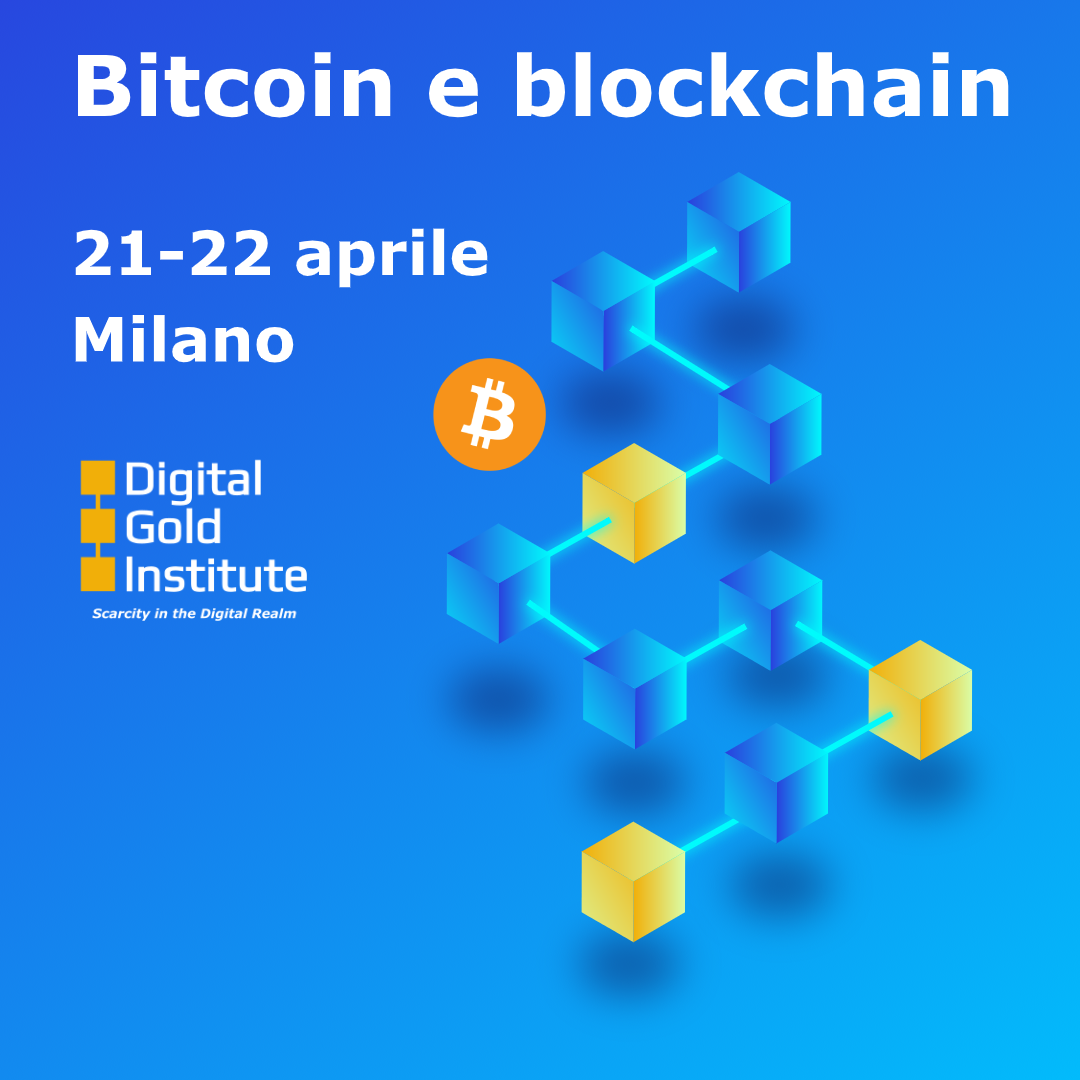
<style>
.page{position:relative;width:1080px;height:1080px}
.page>*{position:absolute;margin:0}
.t1{font:84px "Verdana-Bold";color:#ffffff}
.t2{font:61px "Verdana-Bold";color:#ffffff}
</style>
<div class="page">
<p class="t1" style="left:77px;top:52px;width:932px;height:66px">Bitcoin e blockchain</p>
<p class="t2" style="left:75px;top:228px;width:413px;height:135px">21-22 aprile<br><br>Milano</p>
</div>
